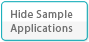
<style>
.page{position:relative;width:89px;height:42px;background:#ffffff}
.page>*{position:absolute;margin:0}
.t1{font:11px/14px "MyriadPro-Regular";letter-spacing:0.04em;color:#737373}
</style>
<div class="page">
<p class="t1" style="left:10px;top:10px;width:63px;height:24px">Hide Sample<br>Applications</p>
</div>
